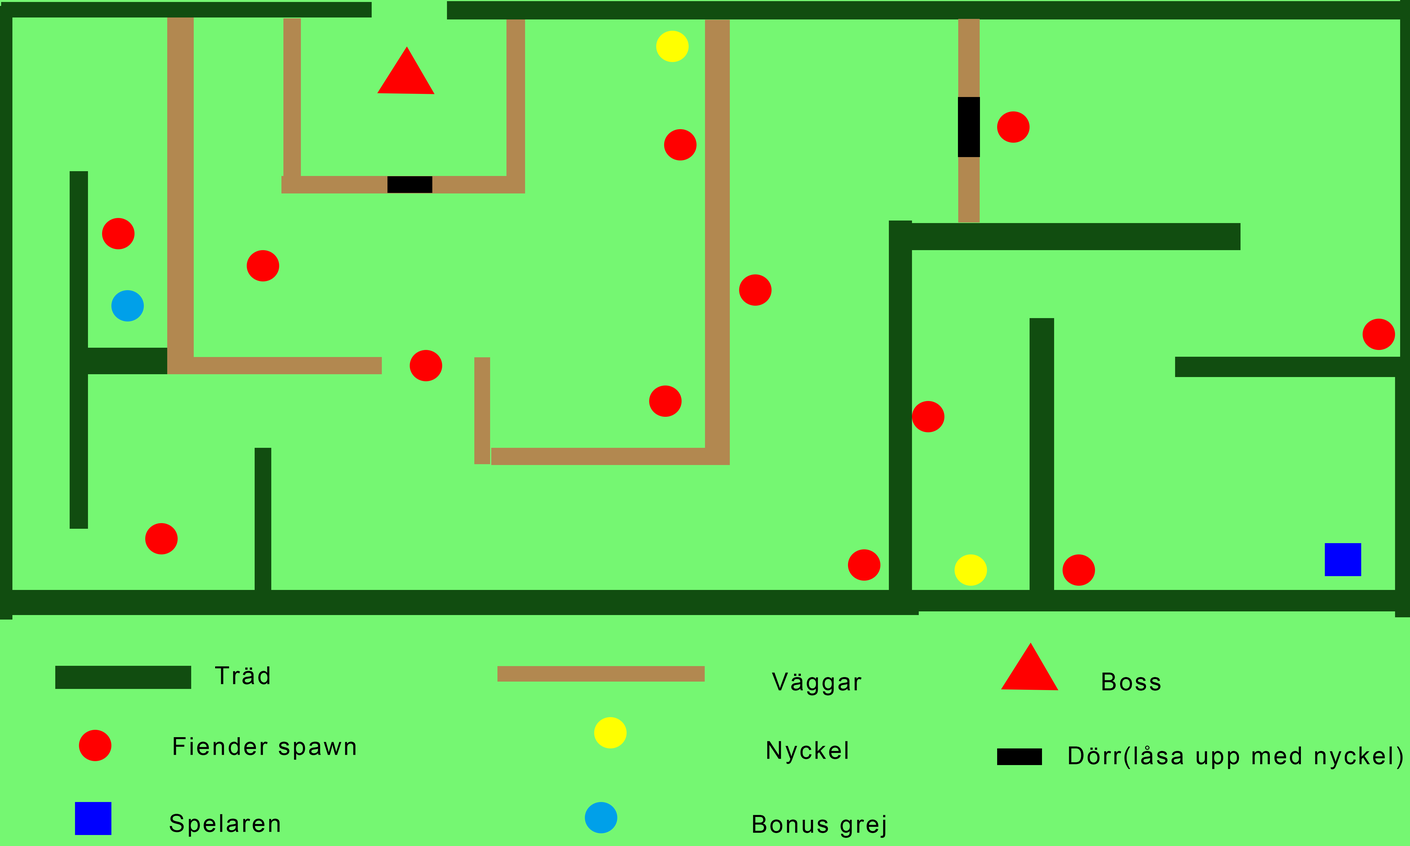
<style>
.page{position:relative;width:1410px;height:846px;background:#75f772}
.page>*{position:absolute;margin:0}
.t1{font:42.3px "ArialMT";letter-spacing:0.08em;color:#000000}
</style>
<div class="page">
<p class="t1" style="left:215px;top:666px;width:55px;height:18px">Träd</p>
<p class="t1" style="left:772px;top:672px;width:90px;height:23px">Väggar</p>
<p class="t1" style="left:1102px;top:672px;width:59px;height:18px">Boss</p>
<p class="t1" style="left:174px;top:737px;width:182px;height:23px">Fiender spawn</p>
<p class="t1" style="left:767px;top:741px;width:81px;height:23px">Nyckel</p>
<p class="t1" style="left:1069px;top:745px;width:333px;height:24px">Dörr(låsa upp med nyckel)</p>
<p class="t1" style="left:169px;top:814px;width:111px;height:23px">Spelaren</p>
<p class="t1" style="left:753px;top:815px;width:132px;height:23px">Bonus grej</p>
</div>
